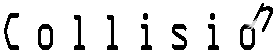
<style>
.page{position:relative;width:279px;height:53px;background:#ffffff}
.page>*{position:absolute;margin:0}
.t1{font:48px "OCRAStd";letter-spacing:0.34em;color:#000000;scale:0.66 1}
</style>
<div class="page">
<p class="t1" style="left:251px;top:3px;width:22px;height:29px;rotate:26deg">n</p>
<p class="t1" style="left:4px;top:13px;width:251px;height:37px">Collisio</p>
</div>
